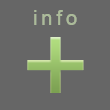
<style>
.page{position:relative;width:110px;height:110px;background:#666666}
.page>*{position:absolute;margin:0}
.t1{font:20px "ArialMT";letter-spacing:0.2em;color:#abbb99}
.t2{font:116.8px "ArialMT";letter-spacing:0.2em}
</style>
<div class="page">
<p class="t1" style="left:34px;top:10px;width:43px;height:15px">info</p>
<p class="t2" style="left:27px;top:37px;width:57px;height:56px">+</p>
</div>
